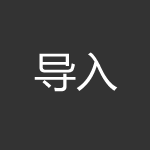
<style>
.page{position:relative;width:150px;height:150px;background:#333333}
.page>*{position:absolute;margin:0}
.t1{font:41.7px "MicrosoftYaHei";color:#ffffff}
</style>
<div class="page">
<p class="t1" style="left:34px;top:52px;width:84px;height:40px">导入</p>
</div>
